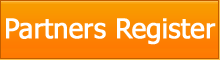
<style>
.page{position:relative;width:220px;height:60px}
.page>*{position:absolute;margin:0}
.t1{font:27px "Tahoma";letter-spacing:-0.01em;color:#ffffff;font-weight:bold}
</style>
<div class="page">
<p class="t1" style="left:6px;top:18px;width:210px;height:27px">Partners Register</p>
</div>
